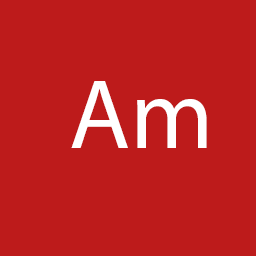
<style>
.page{position:relative;width:256px;height:256px;background:#bd1b1b}
.page>*{position:absolute;margin:0}
.t1{font:100px "MyriadPro-Regular";color:#ffffff}
</style>
<div class="page">
<p class="t1" style="left:71px;top:81px;width:136px;height:67px">Am</p>
</div>
